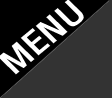
<style>
.page{position:relative;width:112px;height:98px;background:#333333}
.page>*{position:absolute;margin:0}
.t1{font:30px "MoeumTXB-HM";color:#ffffff;scale:1.14 1}
</style>
<div class="page">
<p class="t1" style="left:0px;top:0px;width:84px;height:75px;rotate:-40deg">MENU</p>
</div>
